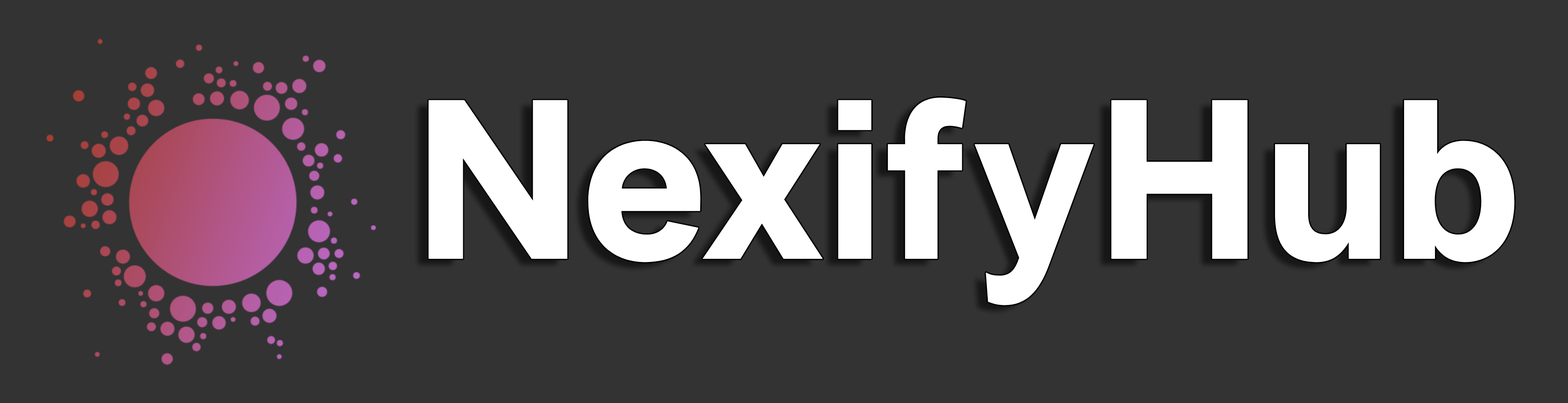
<style>
.page{position:relative;width:1568px;height:403px;background:#333333}
.page>*{position:absolute;margin:0}
.t1{font:220.6px "VremenaGroteskBold";color:#ffffff}
</style>
<div class="page">
<p class="t1" style="left:428px;top:98px;width:1087px;height:208px">NexifyHub</p>
</div>
